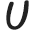
<style>
.page{position:relative;width:32px;height:32px;background:#ffffff}
.page>*{position:absolute;margin:0}
.t1{font:32px "Pacifico-Regular";color:#222222}
</style>
<div class="page">
<p class="t1" style="left:6px;top:0px;width:23px;height:30px">U</p>
</div>
